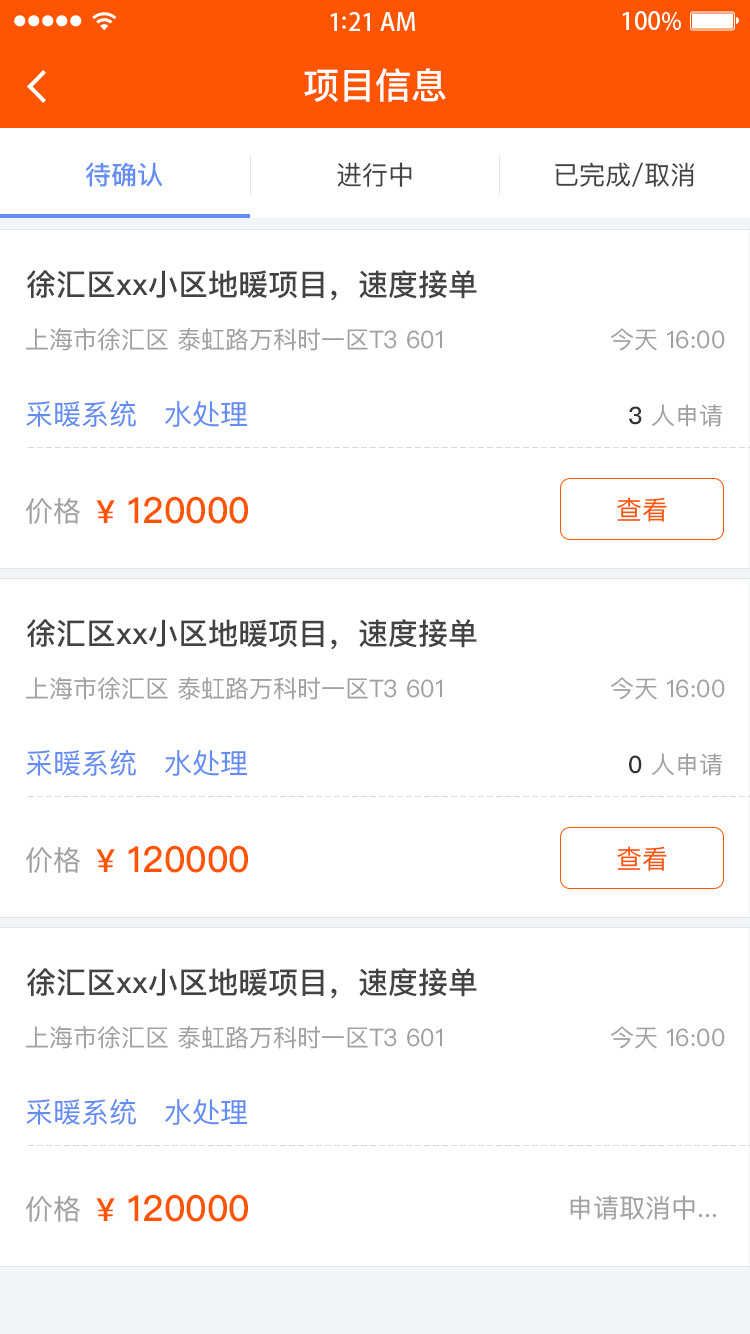
<style>
.page{position:relative;width:750px;height:1334px;background:#ffffff}
.page>*{position:absolute;margin:0}
.t1{font:36px "PingFangSC-Medium";color:#ffffff}
.t2{font:26px "PingFangSC-Medium";color:#648df6}
.t3{font:26px "PingFangSC-Regular";color:#434343}
.t4{font:30px "PingFangSC-Medium";color:#434343}
.t5{font:24px "PingFangSC-Regular";color:#a0a0a0}
.t6{font:28px "PingFangSC-Regular";color:#648df4}
.t7{font:24px "PingFangSC-Medium";color:#333333}
.t8{font:36px "PingFangSC-Medium";color:#ff5400}
.t9{font:32px "PingFangSC-Medium";color:#ff5400}
.t10{font:26px "PingFangSC-Regular";color:#ff5400}
.t11{font:28px "PingFangSC-Regular";color:#a0a0a0}
.t12{font:26px "PingFangSC-Regular";color:#a0a0a0}
</style>
<div class="page">
<p class="t1" style="left:304px;top:68px;width:142px;height:34px">项目信息</p>
<p class="t2" style="left:86px;top:162px;width:77px;height:25px">待确认</p>
<p class="t3" style="left:337px;top:162px;width:75px;height:25px">进行中</p>
<p class="t3" style="left:555px;top:162px;width:140px;height:25px">已完成/取消</p>
<p class="t4" style="left:27px;top:270px;width:450px;height:31px">徐汇区xx小区地暖项目，速度接单</p>
<p class="t5" style="left:26px;top:328px;width:416px;height:23px">上海市徐汇区 泰虹路万科时一区T3 601</p>
<p class="t5" style="left:611px;top:328px;width:114px;height:23px">今天 16:00</p>
<p class="t6" style="left:26px;top:400px;width:110px;height:27px">采暖系统</p>
<p class="t6" style="left:165px;top:400px;width:82px;height:27px">水处理</p>
<p class="t5" style="left:629px;top:404px;width:93px;height:23px"><span class="t7">3</span> 人申请</p>
<p class="t8" style="left:96px;top:496px;width:152px;height:28px"><span class="t9">¥</span> 120000</p>
<p class="t10" style="left:617px;top:497px;width:50px;height:25px">查看</p>
<p class="t11" style="left:26px;top:498px;width:54px;height:26px">价格</p>
<p class="t4" style="left:27px;top:619px;width:450px;height:31px">徐汇区xx小区地暖项目，速度接单</p>
<p class="t5" style="left:26px;top:677px;width:416px;height:23px">上海市徐汇区 泰虹路万科时一区T3 601</p>
<p class="t5" style="left:611px;top:677px;width:114px;height:23px">今天 16:00</p>
<p class="t6" style="left:26px;top:749px;width:110px;height:27px">采暖系统</p>
<p class="t6" style="left:165px;top:749px;width:82px;height:27px">水处理</p>
<p class="t5" style="left:629px;top:753px;width:93px;height:23px"><span class="t7">0</span> 人申请</p>
<p class="t8" style="left:96px;top:845px;width:152px;height:28px"><span class="t9">¥</span> 120000</p>
<p class="t10" style="left:617px;top:846px;width:50px;height:25px">查看</p>
<p class="t11" style="left:26px;top:847px;width:54px;height:26px">价格</p>
<p class="t4" style="left:27px;top:968px;width:450px;height:31px">徐汇区xx小区地暖项目，速度接单</p>
<p class="t5" style="left:26px;top:1026px;width:416px;height:23px">上海市徐汇区 泰虹路万科时一区T3 601</p>
<p class="t5" style="left:611px;top:1026px;width:114px;height:23px">今天 16:00</p>
<p class="t6" style="left:26px;top:1098px;width:110px;height:27px">采暖系统</p>
<p class="t6" style="left:165px;top:1098px;width:82px;height:27px">水处理</p>
<p class="t11" style="left:26px;top:1196px;width:54px;height:26px">价格</p>
<p class="t8" style="left:96px;top:1194px;width:152px;height:28px"><span class="t9">¥</span> 120000</p>
<p class="t12" style="left:570px;top:1195px;width:147px;height:25px">申请取消中...</p>
</div>
